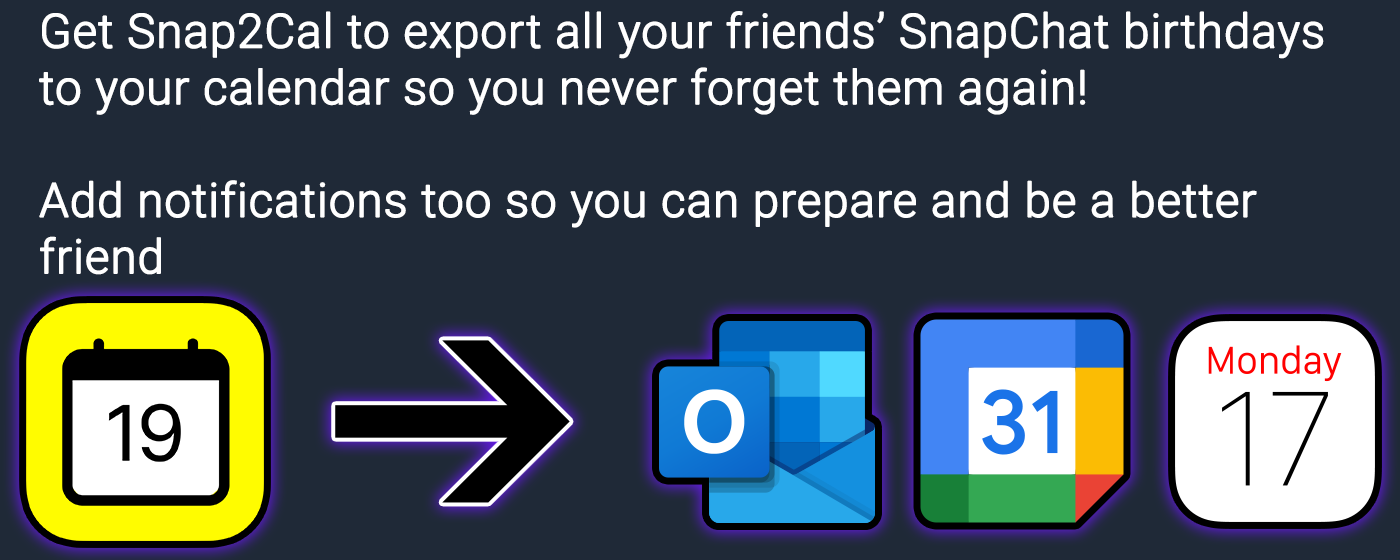
<style>
.page{position:relative;width:1400px;height:560px;background:#1f2937}
.page>*{position:absolute;margin:0}
.t1{font:47px "Roboto-Light";color:#ffffff;font-weight:bold}
</style>
<div class="page">
<p class="t1" style="left:39px;top:11px;width:1285px;height:264px">Get Snap2Cal to export all your friends’ SnapChat birthdays to your calendar so you never forget them again!<br><br>Add notifications too so you can prepare and be a better friend</p>
</div>
